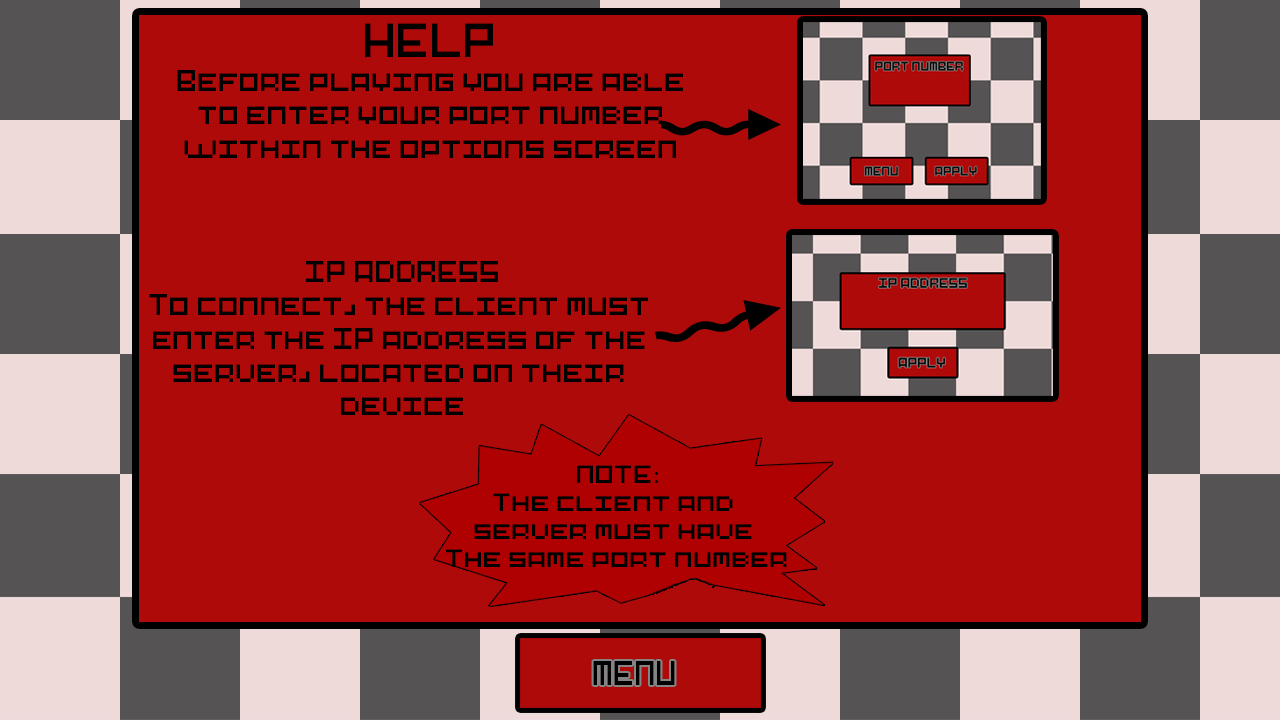
<style>
.page{position:relative;width:1280px;height:720px;background:#af0a0a}
.page>*{position:absolute;margin:0}
.t1{font:27.8px "Pixel-Art";color:#000000}
.t2{font:44.6px "Pixel-Art";color:#000000}
.t3{font:23.4px "Pixel-Art";color:#000000;scale:1.09 1}
.t4{font:23.4px "MyriadPro-Regular";color:#000000;scale:1.09 1}
.t5{font:32px "Pixel-Art";color:#000000;scale:0.88 1}
</style>
<div class="page">
<p class="t1" style="left:177px;top:23px;width:506px;height:135px;text-align:center"><span class="t2">HELP</span><br>Before playing you are able to enter your port number within the options screen</p>
<p class="t1" style="left:149px;top:261px;width:499px;height:154px;text-align:center">IP ADDRESS<br>To connect, the client must <br>enter the IP address of the <br>server, located on their <br>device</p>
<p class="t3" style="left:446px;top:465px;width:341px;height:102px;text-align:center">NOTE<span class="t4">:<br></span>The client and <br>server must have <br>The same port number</p>
<p class="t5" style="left:593px;top:661px;width:82px;height:24px">MENU</p>
</div>
